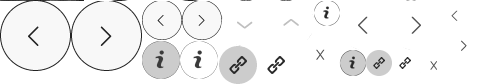
<style>
.page{position:relative;width:490px;height:84px;background:#ffffff}
.page>*{position:absolute;margin:0}
.t1{font:24px "QuicksandLight-Regular";letter-spacing:0.1em;color:#535353;font-weight:bold}
.t2{font:14px "QuicksandLight-Regular";letter-spacing:0.1em;font-weight:bold}
.t3{font:35.9px "QuicksandLight-Regular";letter-spacing:0.1em;color:#bfbfbf;font-weight:bold}
.t4{font:36px "QuicksandLight-Regular";letter-spacing:0.1em;color:#bfbfbf;font-weight:bold}
.t5{font:14px "QuicksandLight-Regular";letter-spacing:0.1em;color:#535353;font-weight:bold}
.t6{font:20px "QuicksandLight-Regular";letter-spacing:0.1em;color:#535353;font-weight:bold}
.t7{font:17px "QuicksandLight-Regular";letter-spacing:0.1em;color:#535353;font-weight:bold}
</style>
<div class="page">
<p class="t1" style="left:358px;top:16px;width:10px;height:18px">&lt;</p>
<p class="t1" style="left:411px;top:16px;width:10px;height:18px">&gt;</p>
<p class="t2" style="left:451px;top:10px;width:7px;height:11px">&lt;</p>
<p class="t3" style="left:237px;top:21px;width:16px;height:8px;rotate:180deg">^</p>
<p class="t4" style="left:283px;top:19px;width:16px;height:7px">^</p>
<p class="t5" style="left:461px;top:40px;width:6px;height:11px">&gt;</p>
<p class="t6" style="left:316px;top:49px;width:9px;height:11px">x</p>
<p class="t7" style="left:430px;top:61px;width:7px;height:9px">x</p>
</div>
